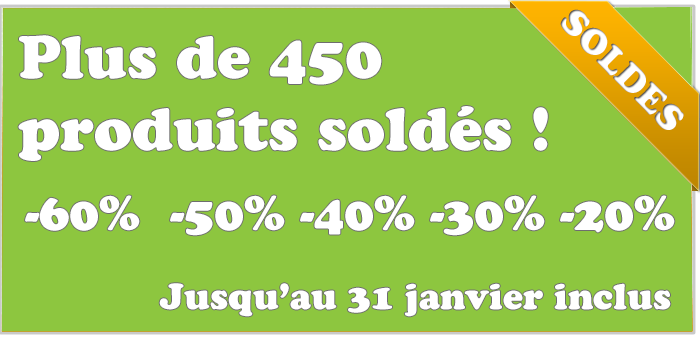
<style>
.page{position:relative;width:700px;height:339px;background:#8dc63f}
.page>*{position:absolute;margin:0}
.t1{font:60px "CooperBlackStd";color:#ffffff}
.t2{font:48px "CooperBlackStd";color:#ffffff}
.t3{font:36px "CooperBlackStd";color:#ffffff}
</style>
<div class="page">
<p class="t1" style="left:18px;top:35px;width:530px;height:126px">Plus de 450 <br>produits soldés !</p>
<p class="t2" style="left:25px;top:195px;width:650px;height:41px">-60%  -50% -40% -30% -20%</p>
<p class="t3" style="left:159px;top:283px;width:512px;height:34px">Jusqu’au 31 janvier inclus</p>
</div>
